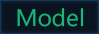
<style>
.page{position:relative;width:99px;height:34px;background:#0a1421}
.page>*{position:absolute;margin:0}
.t1{font:24px "SegoeUISymbol";color:#19b579}
</style>
<div class="page">
<p class="t1" style="left:17px;top:8px;width:67px;height:19px">Model</p>
</div>
